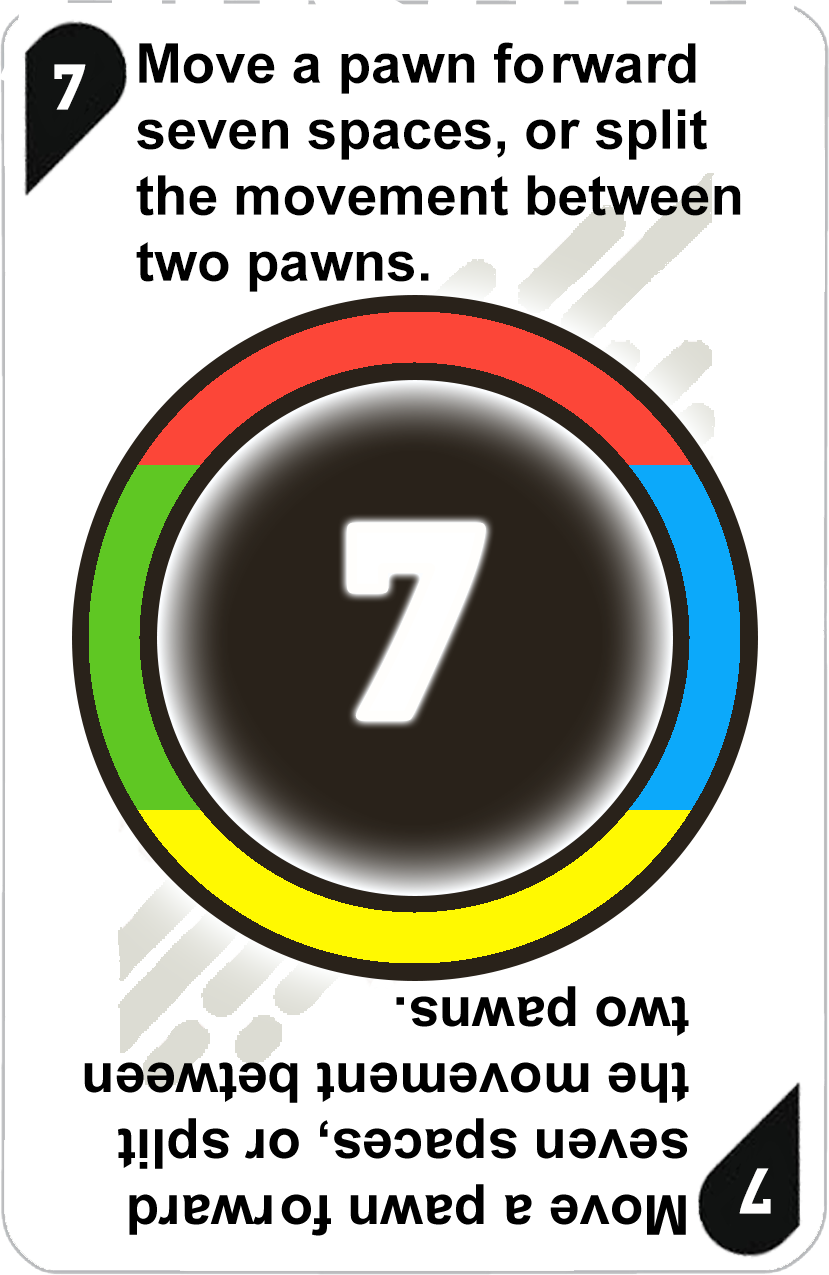
<style>
.page{position:relative;width:829px;height:1275px;background:#ffffff}
.page>*{position:absolute;margin:0}
.t1{font:55px "Arial-BoldMT";color:#000000}
.t2{font:72px "AdGothic-Regular";color:#ffffff}
.t3{font:300px "AdGothic-Regular";color:#ffffff}
</style>
<div class="page">
<p class="t1" style="left:136px;top:42px;width:605px;height:250px">Move a pawn forward <br>seven spaces, or split <br>the movement between <br>two pawns.</p>
<p class="t2" style="left:54px;top:64px;width:32px;height:46px">7</p>
<p class="t3" style="left:352px;top:527px;width:129px;height:189px">7</p>
</div>
